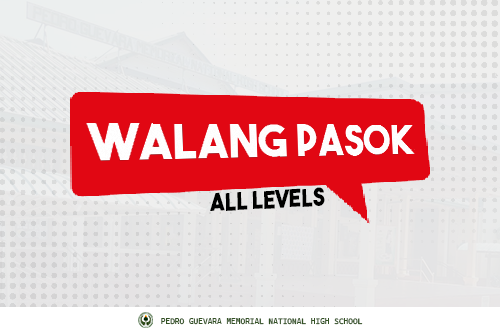
<style>
.page{position:relative;width:500px;height:333px}
.page>*{position:absolute;margin:0}
.t1{font:24.3px "TheBoldFont";color:#000000;scale:0.94 1}
.t2{font:8px "CascadiaCode-Roman";color:#335224}
</style>
<div class="page">
<p class="t1" style="left:210px;top:187px;width:115px;height:24px;rotate:-3deg">ALL LEVELS</p>
<p class="t2" style="left:161px;top:318px;width:202px;height:7px">PEDRO GUEVARA MEMORIAL NATIONAL HIGH SCHOOL</p>
</div>
